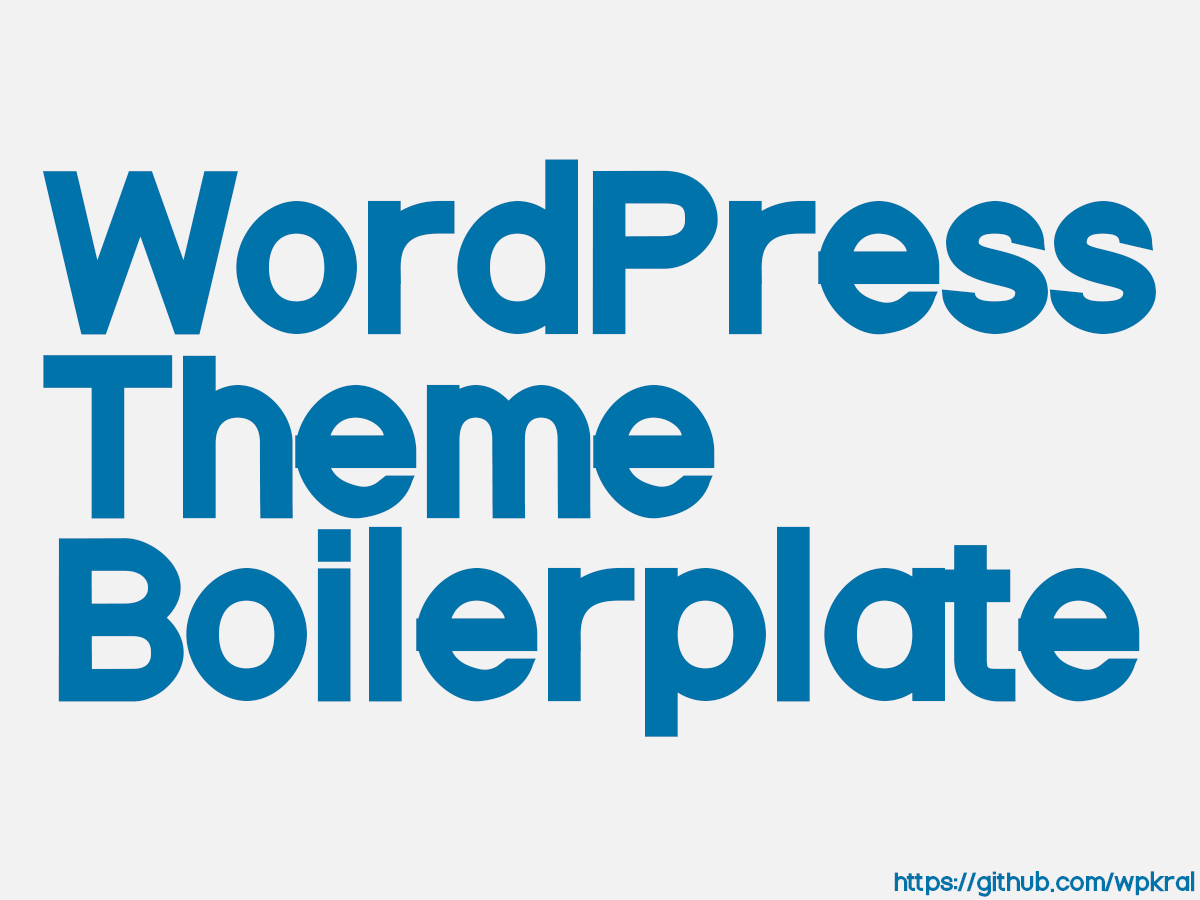
<style>
.page{position:relative;width:1200px;height:900px;background:#f2f2f2}
.page>*{position:absolute;margin:0}
.t1{font:192.1px/183.3px "NordicaBlack";letter-spacing:0.05em;color:#0073aa}
.t2{font:22.7px "NordicaRegular";letter-spacing:0.05em;color:#0073aa}
</style>
<div class="page">
<p class="t1" style="left:42px;top:159px;width:1114px;height:578px">WordPress<br>Theme<br>Boilerplate</p>
<p class="t2" style="left:894px;top:871px;width:301px;height:26px">https://github.com/wpkral</p>
</div>
